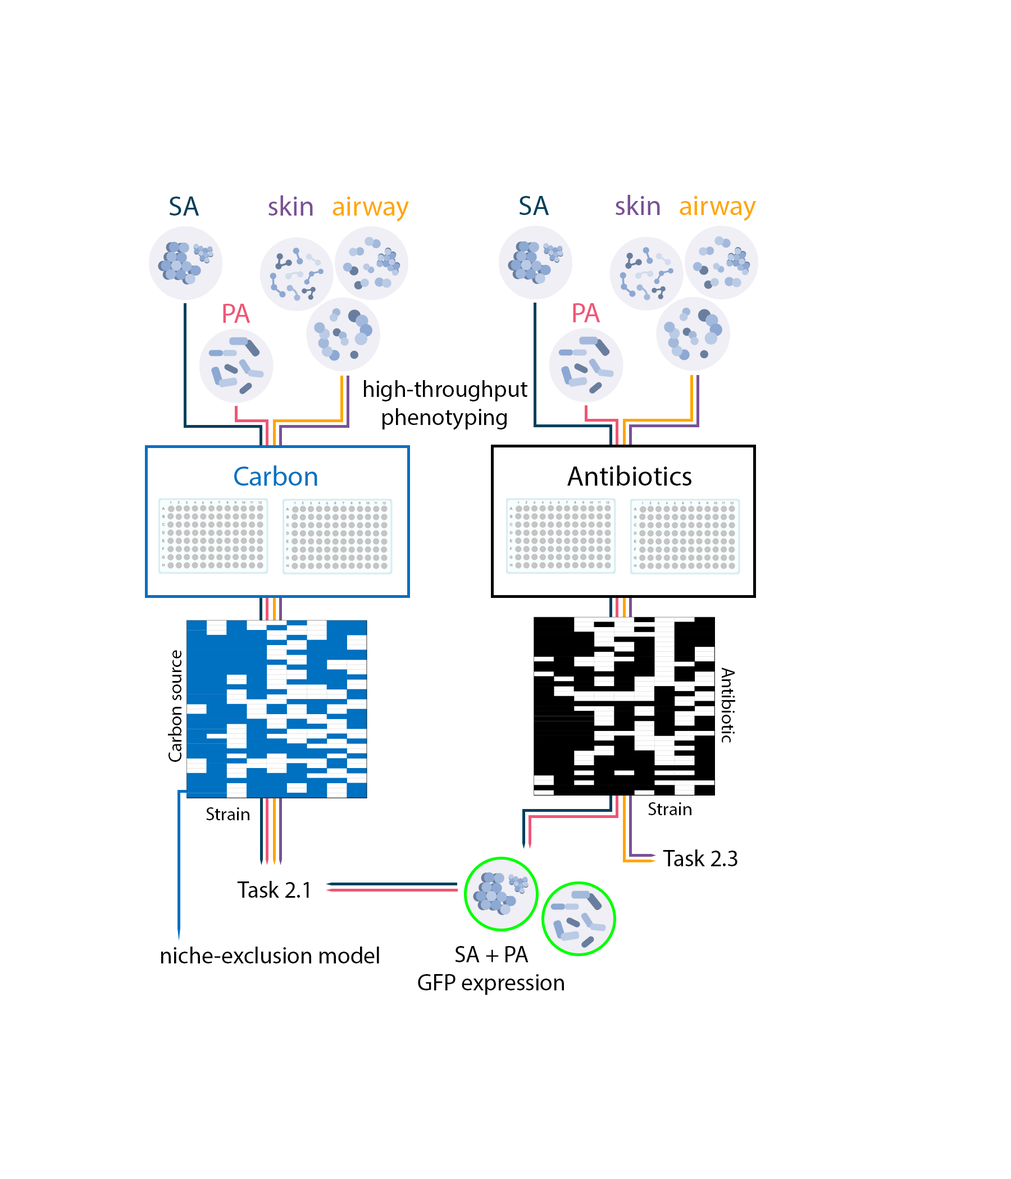
<style>
.page{position:relative;width:1011px;height:1179px;background:#ffffff}
.page>*{position:absolute;margin:0}
.t1{font:28.1px "MyriadPro-Regular";color:#003f5c}
.t2{font:28.1px "MyriadPro-Regular";color:#ffa600}
.t3{font:28.1px "MyriadPro-Regular";color:#7a5195}
.t4{font:28.1px "MyriadPro-Regular";color:#ef5675}
.t5{font:23.4px "MyriadPro-Regular";color:#000000}
.t6{font:28.1px "MyriadPro-Regular";color:#0271c0}
.t7{font:28.1px "MyriadPro-Regular";color:#010101}
.t8{font:18.7px "MyriadPro-Regular";color:#000000}
</style>
<div class="page">
<p class="t1" style="left:169px;top:197px;width:30px;height:19px">SA</p>
<p class="t2" style="left:268px;top:195px;width:141px;height:27px"><span class="t3">skin   </span>airway</p>
<p class="t1" style="left:519px;top:196px;width:30px;height:19px">SA</p>
<p class="t2" style="left:616px;top:195px;width:140px;height:26px"><span class="t3">skin   </span>airway</p>
<p class="t4" style="left:223px;top:304px;width:27px;height:19px">PA</p>
<p class="t4" style="left:573px;top:303px;width:27px;height:19px">PA</p>
<p class="t5" style="left:364px;top:380px;width:163px;height:50px;text-align:center">high-throughput <br>phenotyping</p>
<p class="t6" style="left:234px;top:466px;width:83px;height:20px">Carbon</p>
<p class="t7" style="left:567px;top:466px;width:124px;height:20px">Antibiotics</p>
<p class="t8" style="left:168px;top:650px;width:13px;height:112px;rotate:-90deg">Carbon source</p>
<p class="t8" style="left:722px;top:668px;width:13px;height:75px;rotate:90deg">Antibiotic</p>
<p class="t8" style="left:206px;top:808px;width:43px;height:13px">Strain</p>
<p class="t8" style="left:648px;top:803px;width:43px;height:13px">Strain</p>
<p class="t5" style="left:663px;top:850px;width:74px;height:17px">Task 2.3</p>
<p class="t5" style="left:237px;top:881px;width:72px;height:17px">Task 2.1</p>
<p class="t5" style="left:161px;top:947px;width:218px;height:17px">niche-exclusion model</p>
<p class="t5" style="left:418px;top:946px;width:146px;height:49px;text-align:center">SA + PA <br>GFP expression</p>
</div>
